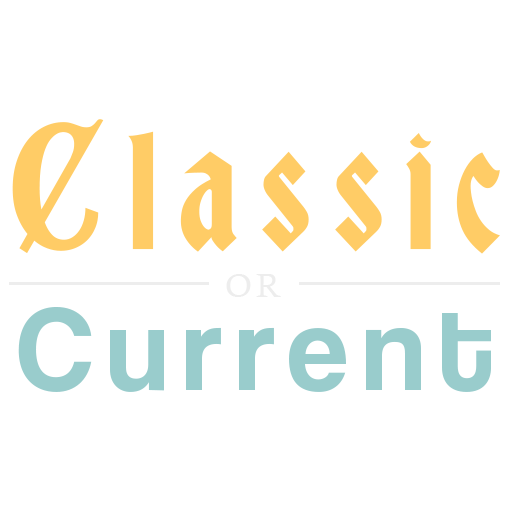
<style>
.page{position:relative;width:512px;height:512px;background:#ffffff}
.page>*{position:absolute;margin:0}
.t1{font:161.6px "BradleyGratis";letter-spacing:0.12em;color:#ffcc66}
.t2{font:34.4px "CalistoMT";letter-spacing:0.12em;color:#ededed}
.t3{font:122.5px "CoolveticaRg-Regular";letter-spacing:0.12em;color:#99cccc}
</style>
<div class="page">
<p class="t1" style="left:12px;top:119px;width:488px;height:135px">Classic</p>
<p class="t2" style="left:226px;top:274px;width:55px;height:23px">OR</p>
<p class="t3" style="left:18px;top:306px;width:473px;height:86px">Current</p>
</div>
